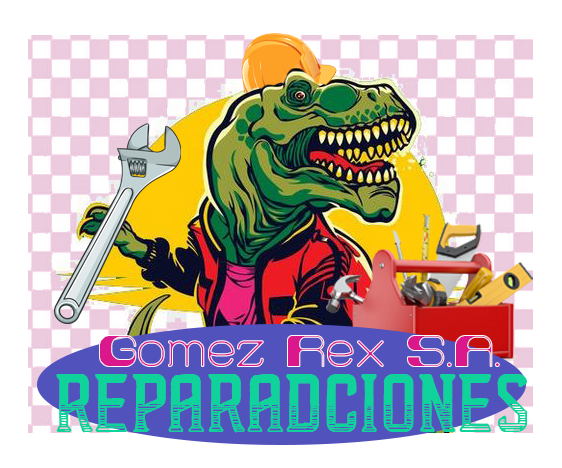
<style>
.page{position:relative;width:562px;height:468px;background:#ffffff}
.page>*{position:absolute;margin:0}
.t1{font:32px "Retro60Prime"}
.t2{font:75.3px "SpeedyRetro";color:#10d39c}
</style>
<div class="page">
<p class="t1" style="left:99px;top:335px;width:401px;height:32px">Gomez Rex S.A.</p>
<p class="t2" style="left:56px;top:374px;width:472px;height:59px">Reparadciones</p>
</div>
